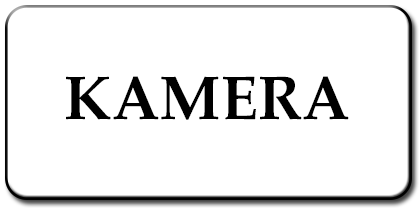
<style>
.page{position:relative;width:420px;height:210px;background:#ffffff}
.page>*{position:absolute;margin:0}
.t1{font:61.4px "PalatinoLinotype-Bold";color:#000000}
</style>
<div class="page">
<p class="t1" style="left:66px;top:76px;width:283px;height:44px">KAMERA</p>
</div>
